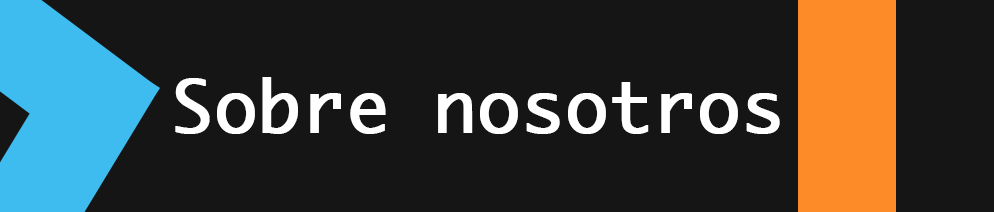
<style>
.page{position:relative;width:994px;height:212px;background:#151516}
.page>*{position:absolute;margin:0}
.t1{font:70px "Monaco";color:#ffffff;font-weight:bold}
</style>
<div class="page">
<p class="t1" style="left:175px;top:77px;width:605px;height:57px">Sobre nosotros</p>
</div>
